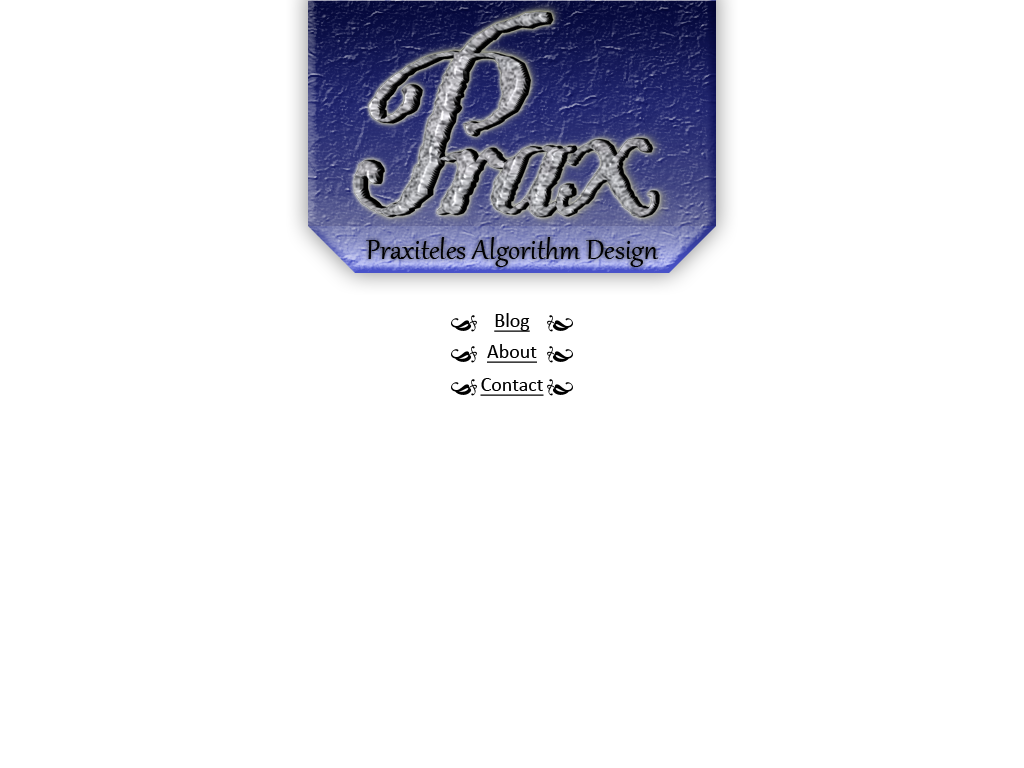
<style>
.page{position:relative;width:1024px;height:768px;background:#ffffff}
.page>*{position:absolute;margin:0}
.t1{font:34px "Gabriola";color:#000000}
.t2{font:20px "Calibri";color:#000000;text-decoration:underline}
</style>
<div class="page">
<p class="t1" style="left:366px;top:237px;width:293px;height:30px">Praxiteles Algorithm Design</p>
<p class="t2" style="left:494px;top:313px;width:36px;height:19px">Blog</p>
<p class="t2" style="left:487px;top:344px;width:50px;height:19px">About</p>
<p class="t2" style="left:480px;top:378px;width:64px;height:18px">Contact</p>
</div>
